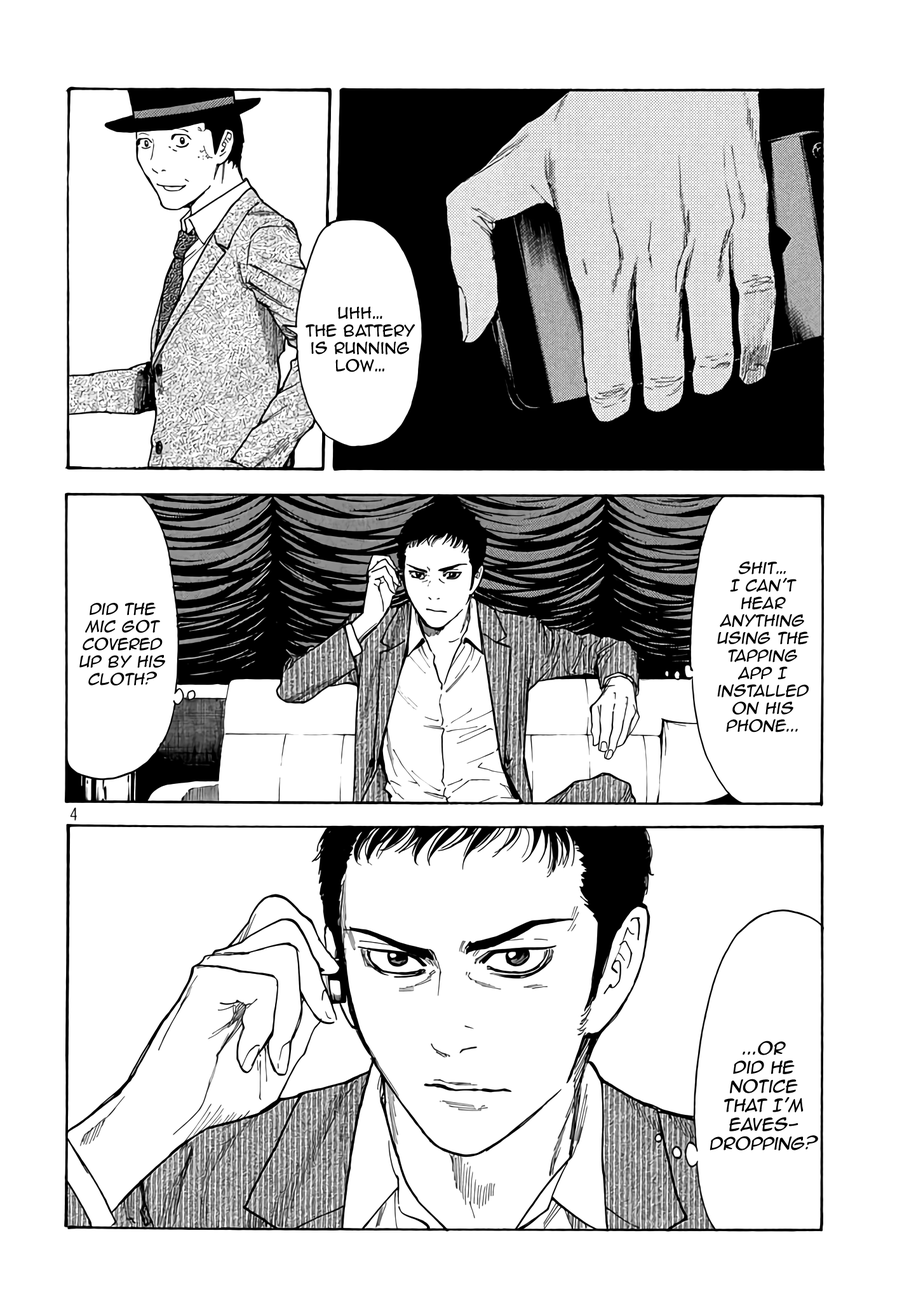
<style>
.page{position:relative;width:916px;height:1301px;background:#ffffff}
.page>*{position:absolute;margin:0}
.t1{font:14.6px "AnimeAce2.0BB";color:#000000}
.t2{font:14.6px "AnimeAce2.0BB";color:#000000;font-style:italic}
.t3{font:15.9px "AnimeAce2.0BB";color:#000000;font-style:italic}
</style>
<div class="page">
<p class="t1" style="left:306px;top:306px;width:110px;height:66px;text-align:center">Uhh… <br>the battery <br>is running low…</p>
<p class="t2" style="left:717px;top:561px;width:92px;height:172px;text-align:center">Shit…<br>I can’t hear anything using The <br>tapping app I installed on his phone...</p>
<p class="t2" style="left:79px;top:602px;width:86px;height:84px;text-align:center">did the mic got covered up by his cloth?</p>
<p class="t3" style="left:710px;top:1041px;width:108px;height:110px;text-align:center">...or<br>Did he notice<br>that I’m eaves-<br>dropping?</p>
</div>
